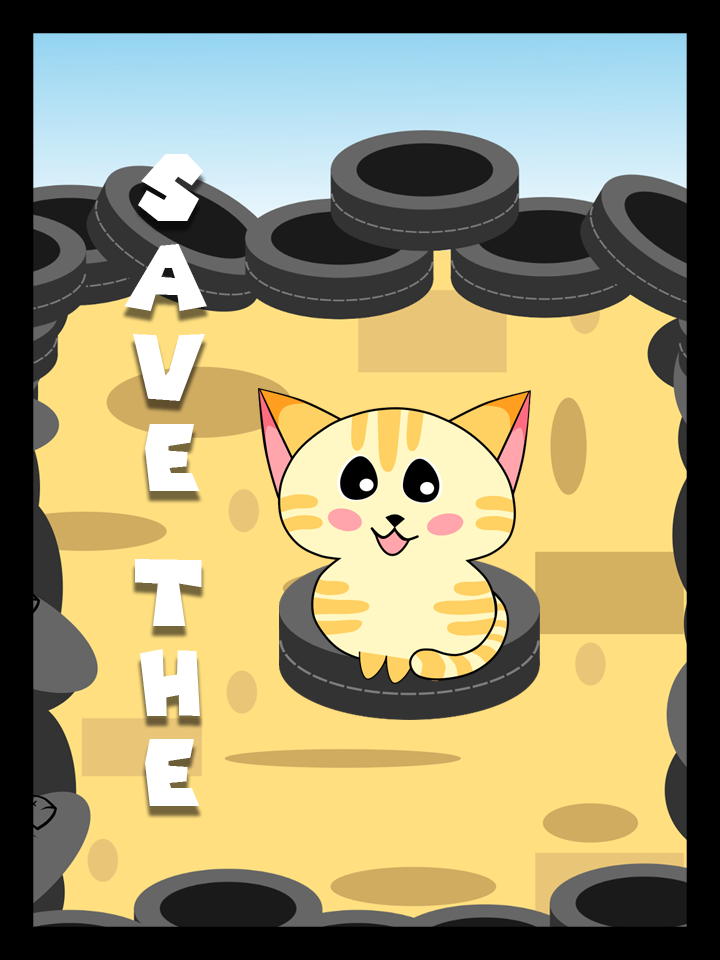
<style>
.page{position:relative;width:720px;height:960px;background:#ffdf80}
.page>*{position:absolute;margin:0}
.t1{font:90px "SuperMarioGalaxy";color:#ffffff}
</style>
<div class="page">
<p class="t1" style="left:124px;top:154px;width:83px;height:652px">Save the</p>
</div>
